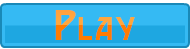
<style>
.page{position:relative;width:190px;height:49px;background:#35baf3}
.page>*{position:absolute;margin:0}
.t1{font:34px "Brassett"}
</style>
<div class="page">
<p class="t1" style="left:55px;top:10px;width:80px;height:30px">Play</p>
</div>
